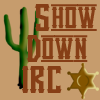
<style>
.page{position:relative;width:100px;height:100px;background:#c69c6d}
.page>*{position:absolute;margin:0}
.t1{font:42px "VanillaWhale";color:#863e16}
</style>
<div class="page">
<p class="t1" style="left:34px;top:4px;width:63px;height:27px">Show</p>
<p class="t1" style="left:26px;top:35px;width:62px;height:27px">Down</p>
<p class="t1" style="left:21px;top:66px;width:41px;height:27px">IRC</p>
</div>
